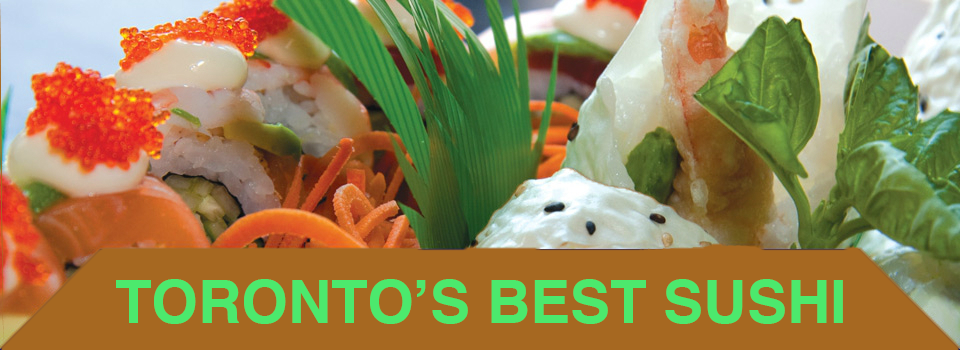
<style>
.page{position:relative;width:960px;height:350px;background:#a66821}
.page>*{position:absolute;margin:0}
.t1{font:60px "Helvetica-Bold";color:#4ce96d}
</style>
<div class="page">
<p class="t1" style="left:116px;top:279px;width:727px;height:45px">TORONTO’S BEST SUSHI</p>
</div>
